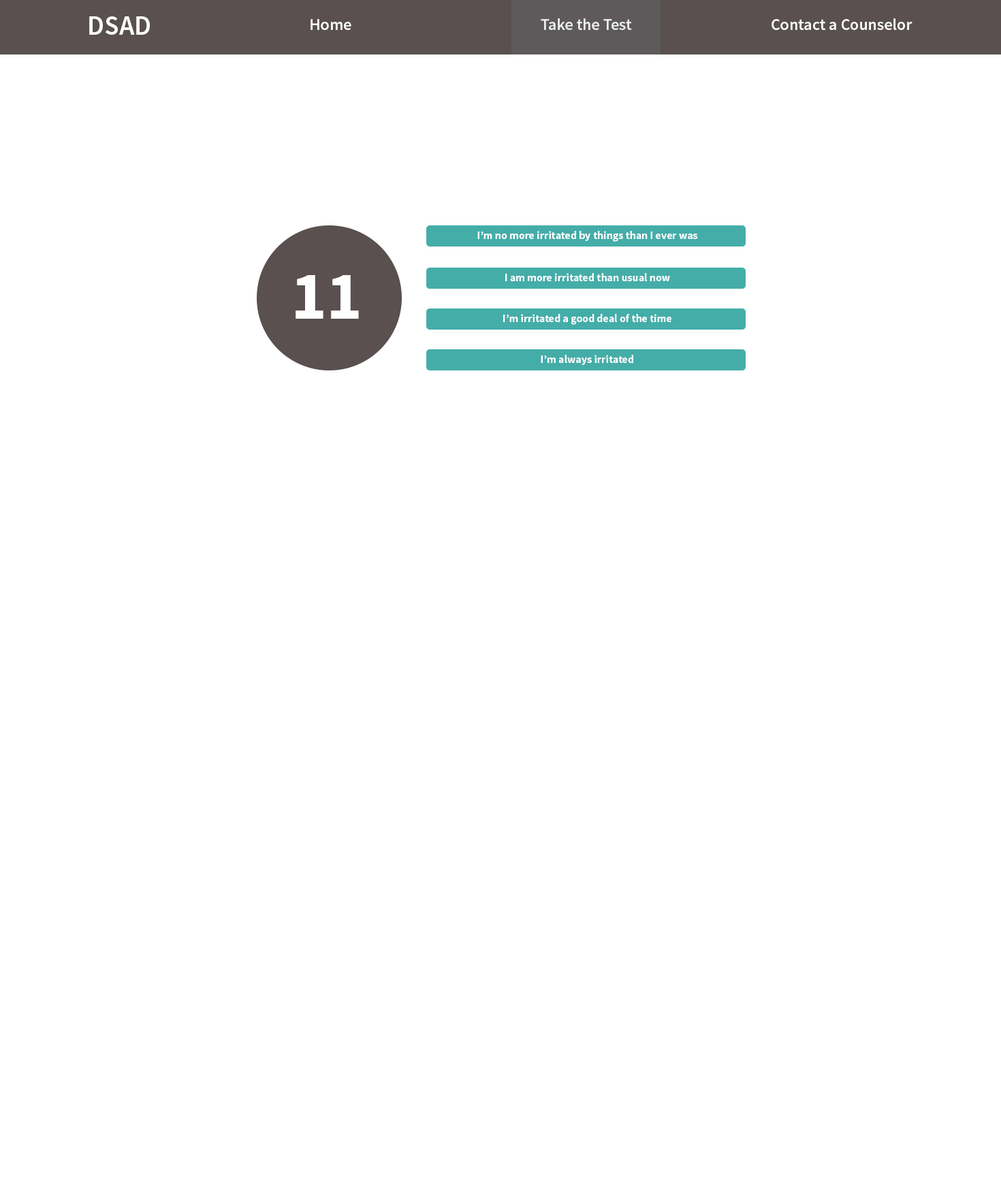
<style>
.page{position:relative;width:1001px;height:1191px;background:#ffffff}
.page>*{position:absolute;margin:0}
.t1{font:27.2px "SourceSansPro-Semibold";color:#ffffff}
.t2{font:16.3px "SourceSansPro-Semibold";color:#ffffff}
.t3{font:10.9px "SourceSansPro-Bold";color:#ffffff}
.t4{font:68.1px "SourceSansPro-Bold";color:#ffffff}
</style>
<div class="page">
<p class="t1" style="left:89px;top:16px;width:61px;height:19px">DSAD</p>
<p class="t2" style="left:311px;top:19px;width:40px;height:11px">Home</p>
<p class="t2" style="left:541px;top:18px;width:91px;height:12px">Take the Test</p>
<p class="t2" style="left:772px;top:18px;width:141px;height:12px">Contact a Counselor</p>
<p class="t3" style="left:477px;top:231px;width:221px;height:11px">I’m no more irritated by things than I ever was</p>
<p class="t4" style="left:296px;top:275px;width:63px;height:44px">11</p>
<p class="t3" style="left:505px;top:273px;width:165px;height:8px">I am more irritated than usual now</p>
<p class="t3" style="left:503px;top:314px;width:168px;height:11px">I’m irritated a good deal of the time</p>
<p class="t3" style="left:541px;top:355px;width:92px;height:10px">I’m always irritated</p>
</div>
